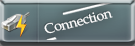
<style>
.page{position:relative;width:135px;height:46px}
.page>*{position:absolute;margin:0}
.t1{font:13.7px "BookAntiqua";letter-spacing:-0.025em;color:#ffffff;scale:1.03 1}
</style>
<div class="page">
<p class="t1" style="left:44px;top:11px;width:69px;height:23px;rotate:-14deg">Connection</p>
</div>
